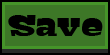
<style>
.page{position:relative;width:110px;height:55px;background:#3d7727}
.page>*{position:absolute;margin:0}
.t1{font:33px "Bigfish-Black";color:#000000}
</style>
<div class="page">
<p class="t1" style="left:8px;top:15px;width:95px;height:21px">Save</p>
</div>
